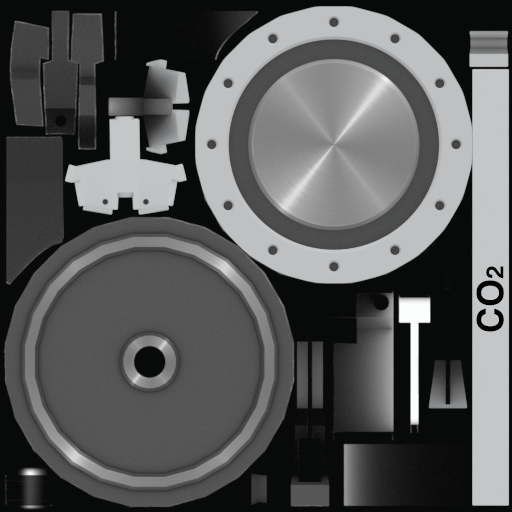
<style>
.page{position:relative;width:512px;height:512px;background:#080909}
.page>*{position:absolute;margin:0}
.t1{font:36px "Helvetica-Bold";color:#000000}
.t2{font:24px "Helvetica-Bold";color:#000000}
</style>
<div class="page">
<p class="t1" style="left:476px;top:266px;width:28px;height:66px;rotate:-90deg">CO<span class="t2">2</span></p>
</div>
